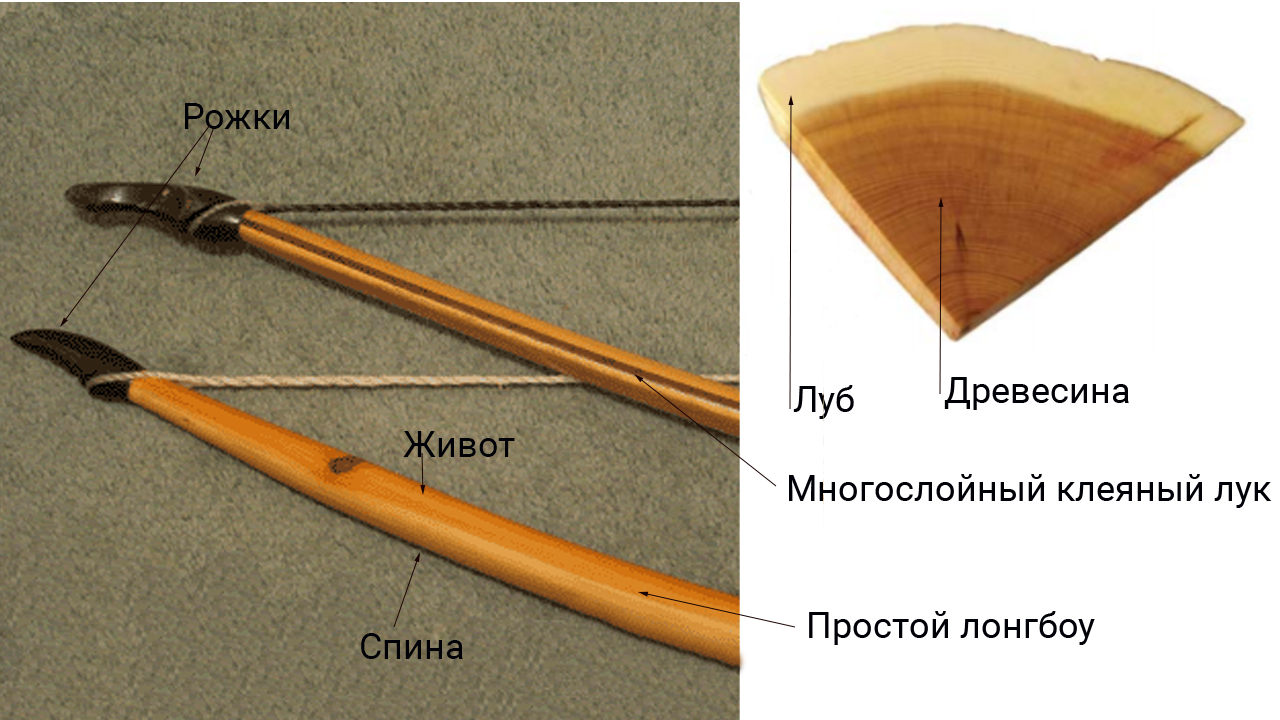
<style>
.page{position:relative;width:1280px;height:720px;background:#ffffff}
.page>*{position:absolute;margin:0}
.t1{font:36px "Roboto-Regular";color:#000007}
</style>
<div class="page">
<p class="t1" style="left:185px;top:103px;width:104px;height:26px">Рожки</p>
<p class="t1" style="left:944px;top:377px;width:185px;height:33px">Древесина</p>
<p class="t1" style="left:793px;top:385px;width:61px;height:34px">Луб</p>
<p class="t1" style="left:403px;top:431px;width:112px;height:26px">Живот</p>
<p class="t1" style="left:789px;top:474px;width:483px;height:34px">Многослойный клеяный лук</p>
<p class="t1" style="left:809px;top:611px;width:286px;height:34px">Простой лонгбоу</p>
<p class="t1" style="left:361px;top:633px;width:102px;height:26px">Спина</p>
</div>
